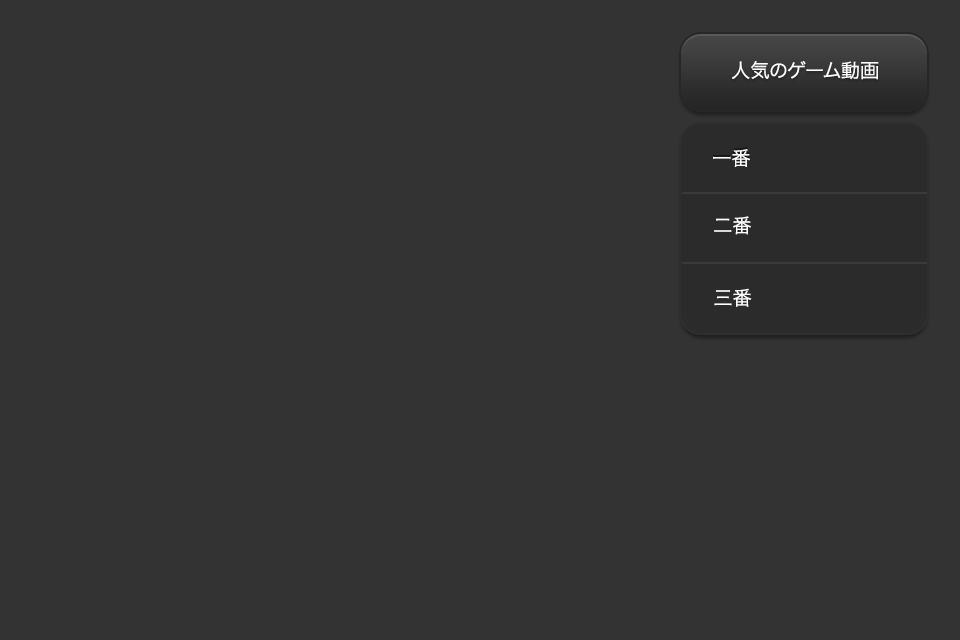
<style>
.page{position:relative;width:960px;height:640px;background:#333333}
.page>*{position:absolute;margin:0}
.t1{font:19.4px "HiraKakuProN-W3";letter-spacing:-0.01em;color:#ffffff}
</style>
<div class="page">
<p class="t1" style="left:732px;top:61px;width:147px;height:19px">人気のゲーム動画</p>
<p class="t1" style="left:713px;top:149px;width:37px;height:18px">一番</p>
<p class="t1" style="left:714px;top:216px;width:37px;height:19px">二番</p>
<p class="t1" style="left:714px;top:288px;width:38px;height:19px">三番</p>
</div>
